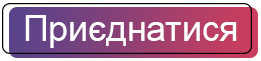
<style>
.page{position:relative;width:261px;height:61px;background:#ffffff}
.page>*{position:absolute;margin:0}
.t1{font:35.6px "ArialMT";color:#ffffff}
</style>
<div class="page">
<p class="t1" style="left:25px;top:15px;width:212px;height:33px">Приєднатися</p>
</div>
